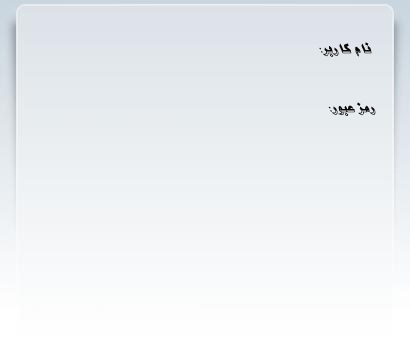
<style>
.page{position:relative;width:410px;height:351px}
.page>*{position:absolute;margin:0}
.t1{font:14.6px "2-Sahar";color:#0a090a}
</style>
<div class="page">
<p class="t1" style="left:319px;top:42px;width:53px;height:15px">نام کاربر:</p>
<p class="t1" style="left:328px;top:102px;width:48px;height:14px">رمز عبور:</p>
</div>
